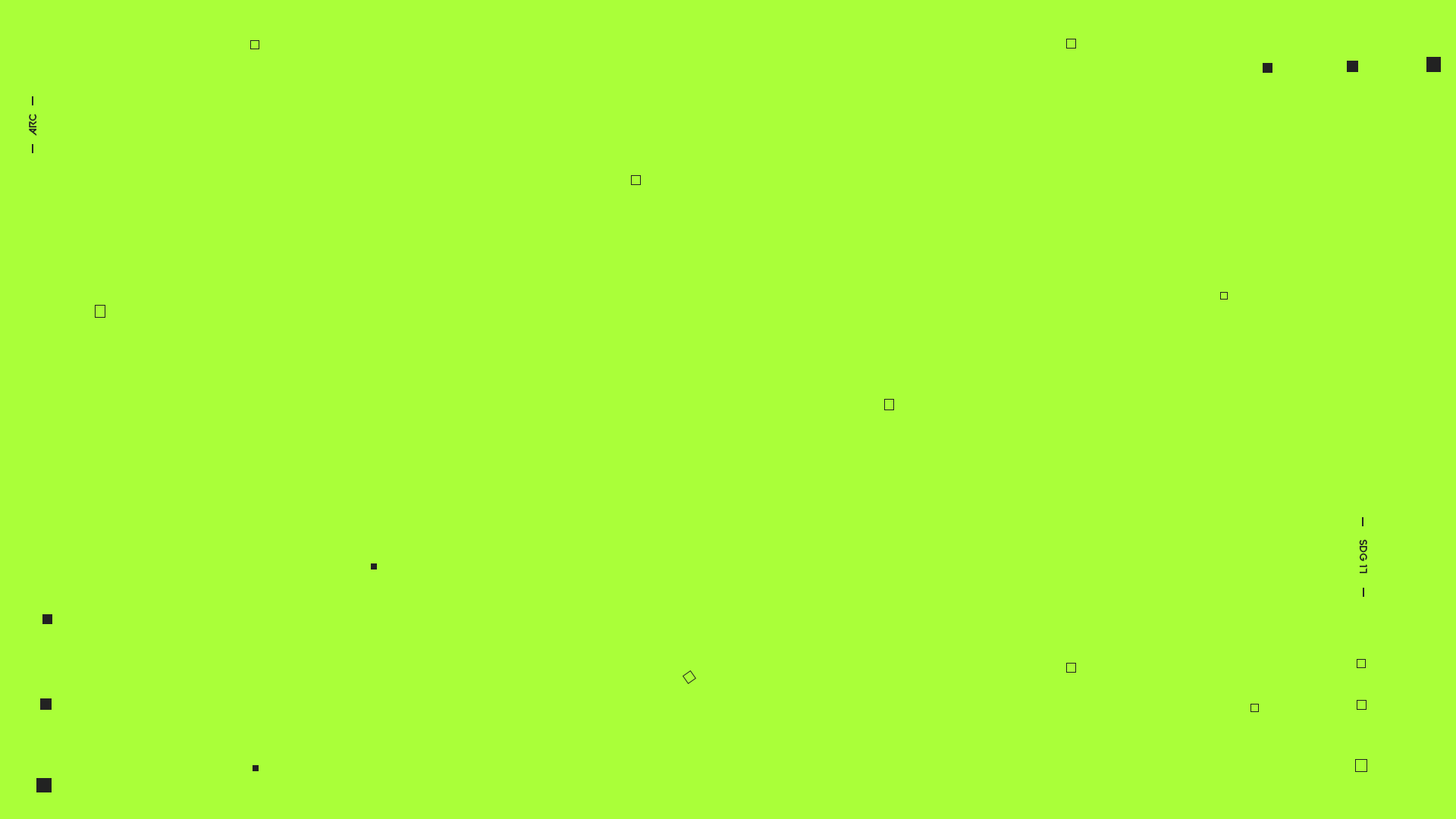
<style>
.page{position:relative;width:1456px;height:819px;background:#aaff39}
.page>*{position:absolute;margin:0}
.t1{font:10.6px "VALORANT-Regular";letter-spacing:0.005em;color:#222222}
</style>
<div class="page">
<p class="t1" style="left:29px;top:114px;width:8px;height:22px;rotate:-90deg">ARC</p>
<p class="t1" style="left:1359px;top:539px;width:8px;height:34px;rotate:90deg">SDG 17</p>
</div>
